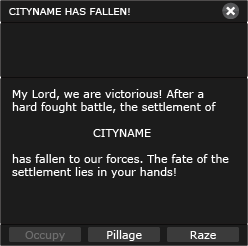
<style>
.page{position:relative;width:248px;height:246px;background:#1c1c1c}
.page>*{position:absolute;margin:0}
.t1{font:10px "Verdana";color:#ffffff}
.t2{font:11px/13px "Verdana";color:#ffffff}
.t3{font:11px "Verdana";color:#6d6d6d}
.t4{font:11px "Verdana";color:#ffffff}
</style>
<div class="page">
<p class="t1" style="left:9px;top:8px;width:121px;height:7px">CITYNAME HAS FALLEN!</p>
<p class="t2" style="left:12px;top:89px;width:217px;height:89px">My Lord, we are victorious! After a hard fought battle, the settlement of <br><br>CITYNAME <br><br>has fallen to our forces. The fate of the settlement lies in your hands!</p>
<p class="t3" style="left:25px;top:231px;width:40px;height:10px">Occupy</p>
<p class="t4" style="left:107px;top:230px;width:35px;height:11px">Pillage</p>
<p class="t4" style="left:190px;top:231px;width:26px;height:8px">Raze</p>
</div>
